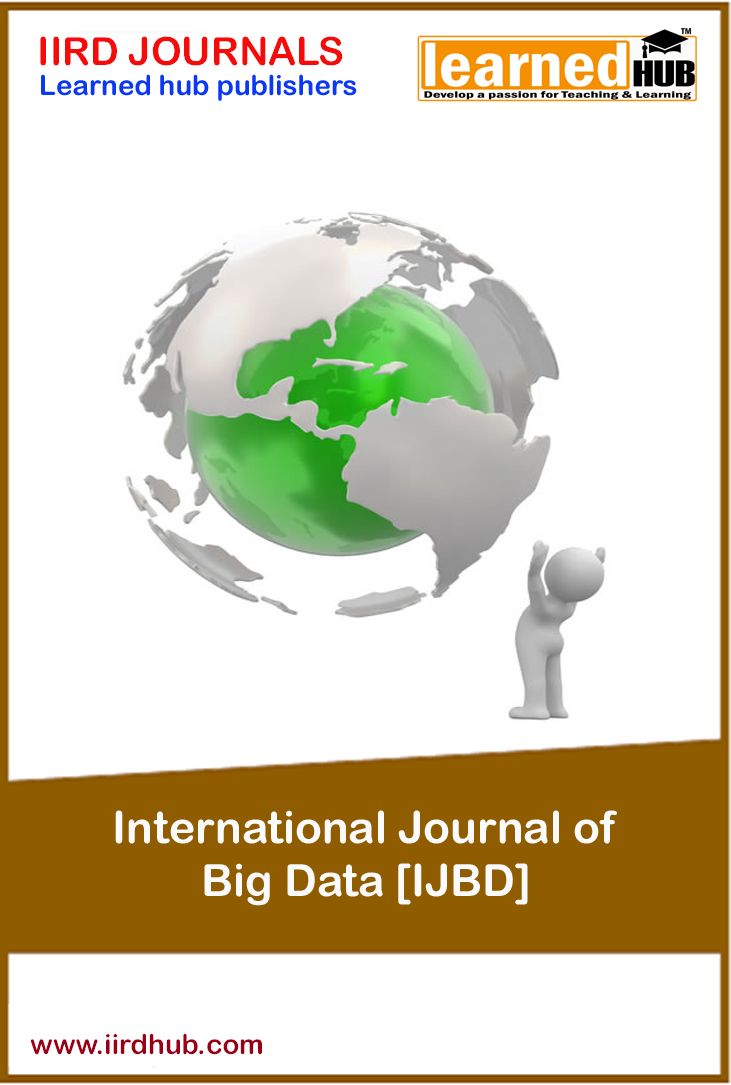
<style>
.page{position:relative;width:731px;height:1085px;background:#ffffff}
.page>*{position:absolute;margin:0}
.t1{font:38.9px "ArialRoundedMTBold";color:#f60b0b}
.t2{font:27.8px "ArialRoundedMTBold";color:#0b37f6}
.t3{font:44.4px "ArialRoundedMTBold";color:#fafafc}
.t4{font:27.8px "ArialRoundedMTBold";color:#990016}
</style>
<div class="page">
<p class="t1" style="left:40px;top:36px;width:303px;height:30px">IIRD JOURNALS</p>
<p class="t2" style="left:41px;top:74px;width:316px;height:27px">Learned hub publishers</p>
<p class="t3" style="left:115px;top:810px;width:502px;height:96px;text-align:center">International Journal of <br>Big Data [IJBD]</p>
<p class="t4" style="left:30px;top:1033px;width:232px;height:22px">www.iirdhub.com</p>
</div>
